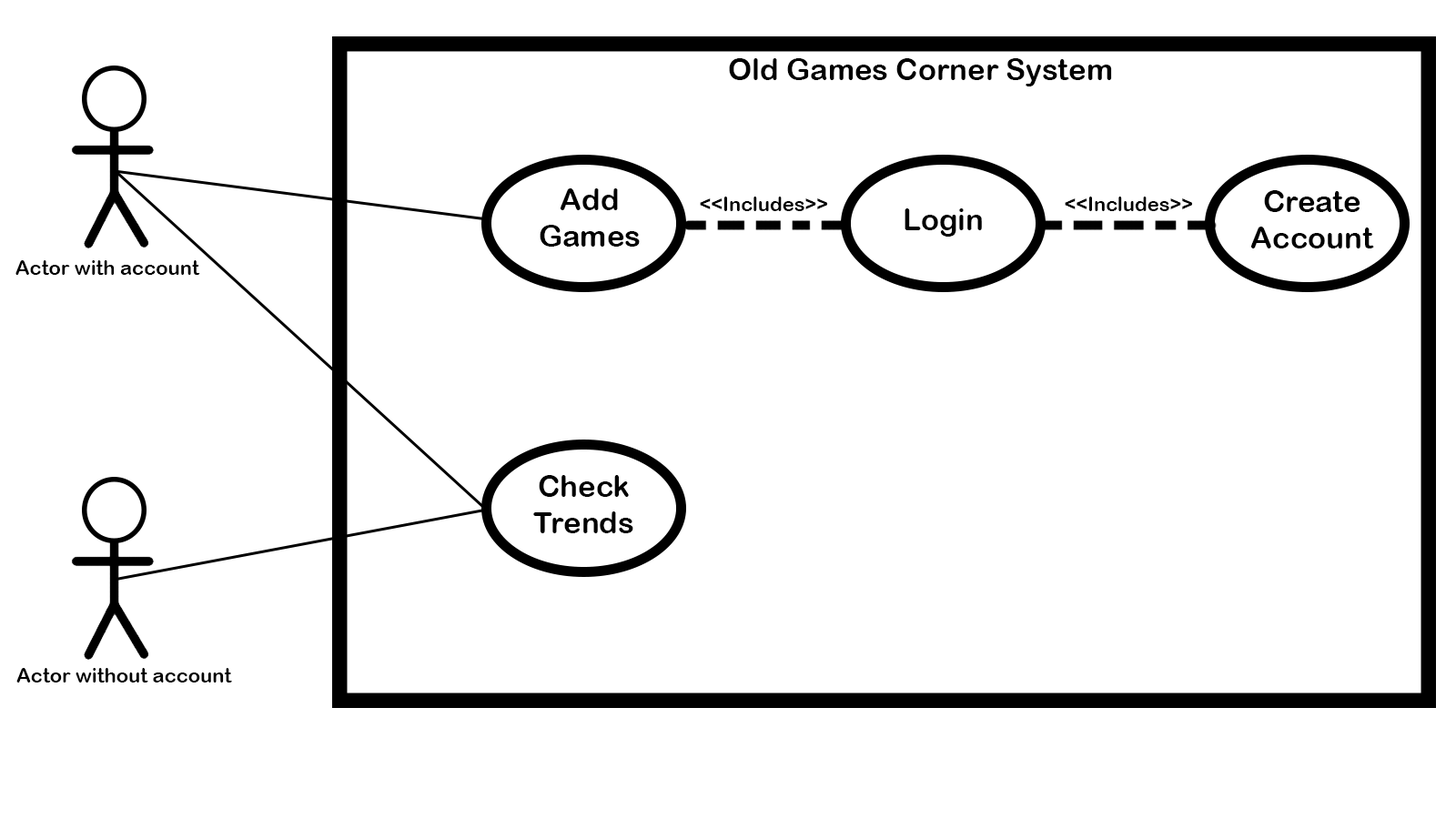
<style>
.page{position:relative;width:1456px;height:819px;background:#ffffff}
.page>*{position:absolute;margin:0}
.t1{font:30px "ArialRoundedMTBold";color:#000000}
.t2{font:20px "ArialRoundedMTBold";color:#000000}
</style>
<div class="page">
<p class="t1" style="left:729px;top:58px;width:383px;height:28px">Old Games Corner System</p>
<p class="t1" style="left:540px;top:188px;width:100px;height:59px;text-align:center">Add Games</p>
<p class="t2" style="left:700px;top:197px;width:127px;height:14px">&lt;&lt;Includes&gt;&gt;</p>
<p class="t2" style="left:1065px;top:197px;width:127px;height:14px">&lt;&lt;Includes&gt;&gt;</p>
<p class="t1" style="left:1250px;top:190px;width:124px;height:58px;text-align:center">Create <br>Account</p>
<p class="t1" style="left:905px;top:208px;width:77px;height:29px">Login</p>
<p class="t2" style="left:15px;top:260px;width:185px;height:15px">Actor with account</p>
<p class="t1" style="left:533px;top:475px;width:100px;height:58px;text-align:center">Check Trends</p>
<p class="t2" style="left:16px;top:668px;width:216px;height:14px">Actor without account</p>
</div>
